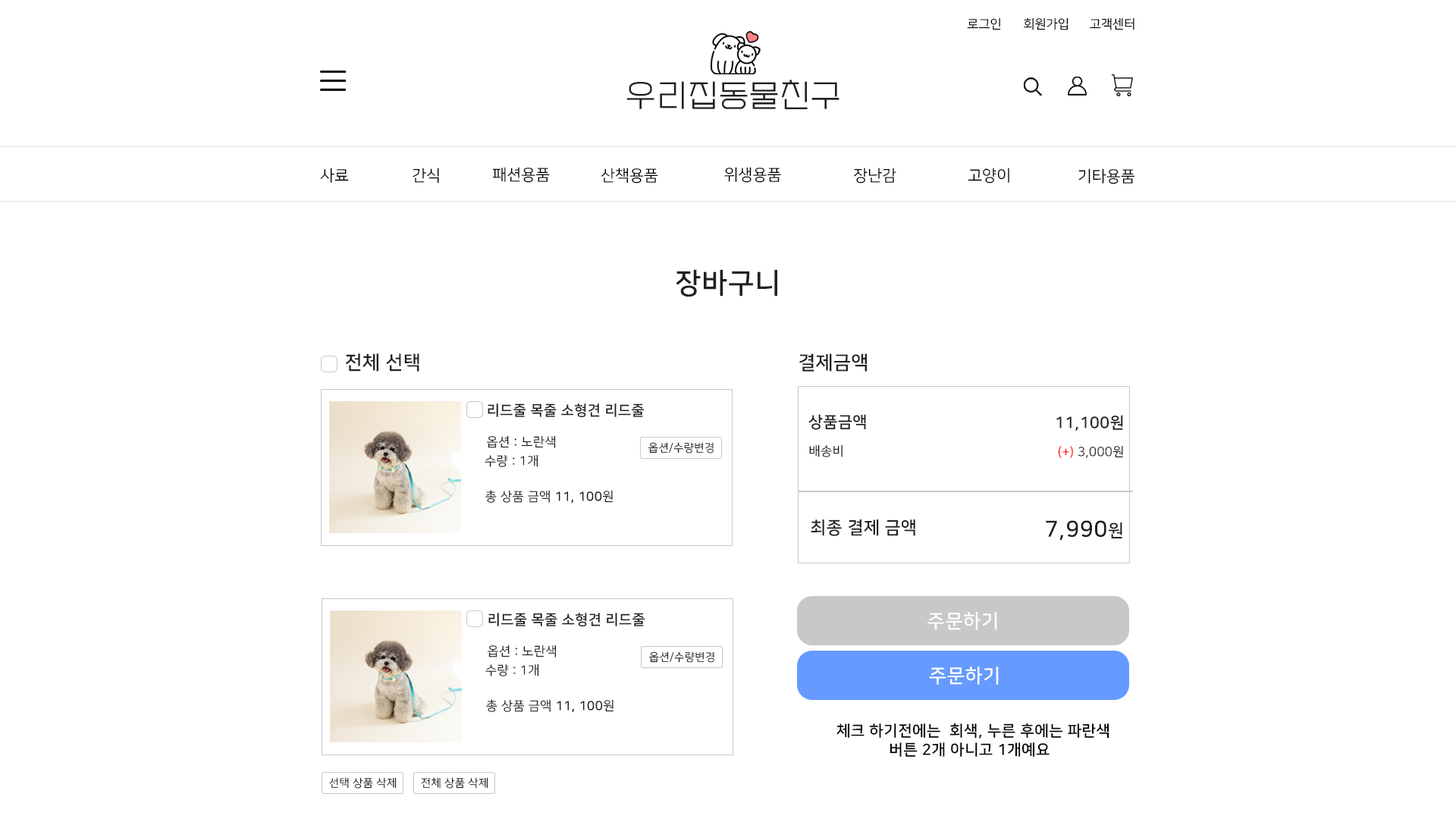
<style>
.page{position:relative;width:1456px;height:819px;background:#ffffff}
.page>*{position:absolute;margin:0}
.t1{font:12.6px "NanumSquareR";color:#000000}
.t2{font:31.6px "EF_watermelonSalad";letter-spacing:0.025em;color:#202020}
.t3{font:15.8px "NanumSquareR";color:#000000}
.t4{font:28.4px "NanumSquareB";letter-spacing:0.025em;color:#202020}
.t5{font:19.1px "NanumSquareB";letter-spacing:0.025em;color:#202020}
.t6{font:19px "NanumSquareB";letter-spacing:0.025em;color:#202020}
.t7{font:14.2px "NanumSquareB";letter-spacing:0.025em;color:#202020}
.t8{font:15.8px "NanumSquareB";letter-spacing:0.025em;color:#202020}
.t9{font:12.6px "NanumSquareR";letter-spacing:0.025em;color:#202020}
.t10{font:11.1px "NanumSquareR";letter-spacing:0.025em;color:#202020}
.t11{font:12.6px "NanumSquareR";letter-spacing:0.025em;color:#ff0000}
.t12{font:12.6px "NanumSquareB";letter-spacing:0.025em;color:#202020}
.t13{font:17.4px "NanumSquareB";letter-spacing:0.025em;color:#202020}
.t14{font:22.1px "NanumSquareB";letter-spacing:0.025em;color:#202020}
.t15{font:19.3px "NanumSquareB";letter-spacing:0.025em;color:#ffffff}
.t16{font:19.2px "NanumSquareB";letter-spacing:0.025em;color:#ffffff}
.t17{font:15.3px "NanumSquareB";letter-spacing:0.025em;color:#000000}
</style>
<div class="page">
<p class="t1" style="left:967px;top:17px;width:34px;height:13px">로그인</p>
<p class="t1" style="left:1024px;top:17px;width:44px;height:13px">회원가입</p>
<p class="t1" style="left:1090px;top:17px;width:44px;height:13px">고객센터</p>
<p class="t2" style="left:626px;top:80px;width:213px;height:29px">우리집동물친구</p>
<p class="t3" style="left:320px;top:168px;width:29px;height:15px">사료</p>
<p class="t3" style="left:413px;top:168px;width:26px;height:16px">간식</p>
<p class="t3" style="left:492px;top:167px;width:58px;height:16px">패션용품</p>
<p class="t3" style="left:601px;top:168px;width:57px;height:16px">산책용품</p>
<p class="t3" style="left:724px;top:167px;width:57px;height:16px">위생용품</p>
<p class="t3" style="left:854px;top:168px;width:42px;height:16px">장난감</p>
<p class="t3" style="left:968px;top:168px;width:41px;height:16px">고양이</p>
<p class="t3" style="left:1078px;top:168px;width:57px;height:16px">기타용품</p>
<p class="t4" style="left:676px;top:269px;width:101px;height:28px">장바구니</p>
<p class="t5" style="left:345px;top:353px;width:74px;height:19px">전체 선택</p>
<p class="t6" style="left:799px;top:353px;width:68px;height:19px">결제금액</p>
<p class="t7" style="left:488px;top:403px;width:157px;height:15px">리드줄 목줄 소형견 리드줄</p>
<p class="t8" style="left:808px;top:414px;width:58px;height:16px">상품금액</p>
<p class="t8" style="left:1056px;top:415px;width:67px;height:16px">11,100원</p>
<p class="t9" style="left:486px;top:435px;width:70px;height:13px">옵션 : 노란색</p>
<p class="t10" style="left:648px;top:442px;width:66px;height:11px">옵션/수량변경</p>
<p class="t9" style="left:809px;top:444px;width:33px;height:13px">배송비</p>
<p class="t9" style="left:1058px;top:445px;width:65px;height:14px"><span class="t11">(+)</span> 3,000원</p>
<p class="t9" style="left:485px;top:454px;width:53px;height:13px">수량 : 1개</p>
<p class="t9" style="left:485px;top:490px;width:128px;height:13px">총 상품 금액 <span class="t12">11, 100</span>원</p>
<p class="t13" style="left:811px;top:519px;width:104px;height:17px">최종 결제 금액</p>
<p class="t14" style="left:1046px;top:520px;width:76px;height:20px">7,990<span class="t13">원</span></p>
<p class="t7" style="left:488px;top:613px;width:157px;height:14px">리드줄 목줄 소형견 리드줄</p>
<p class="t15" style="left:927px;top:612px;width:70px;height:18px">주문하기</p>
<p class="t9" style="left:487px;top:645px;width:70px;height:12px">옵션 : 노란색</p>
<p class="t10" style="left:649px;top:651px;width:65px;height:12px">옵션/수량변경</p>
<p class="t9" style="left:485px;top:664px;width:54px;height:12px">수량 : 1개</p>
<p class="t16" style="left:929px;top:667px;width:70px;height:18px">주문하기</p>
<p class="t9" style="left:486px;top:699px;width:127px;height:13px">총 상품 금액 <span class="t12">11, 100</span>원</p>
<p class="t17" style="left:836px;top:723px;width:273px;height:34px;text-align:center">체크 하기전에는  회색, 누른 후에는 파란색<br>버튼 2개 아니고 1개예요</p>
<p class="t10" style="left:329px;top:777px;width:68px;height:12px">선택 상품 삭제</p>
<p class="t10" style="left:421px;top:777px;width:67px;height:12px">전체 상품 삭제</p>
</div>
